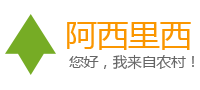
<style>
.page{position:relative;width:200px;height:90px;background:#ffffff}
.page>*{position:absolute;margin:0}
.t1{font:31.5px "MicrosoftYaHeiUI";color:#fa9600}
.t2{font:14.4px "MicrosoftYaHeiUI";color:#666666}
</style>
<div class="page">
<p class="t1" style="left:67px;top:22px;width:124px;height:28px">阿西里西</p>
<p class="t2" style="left:69px;top:54px;width:125px;height:16px">您好，我来自农村！</p>
</div>
